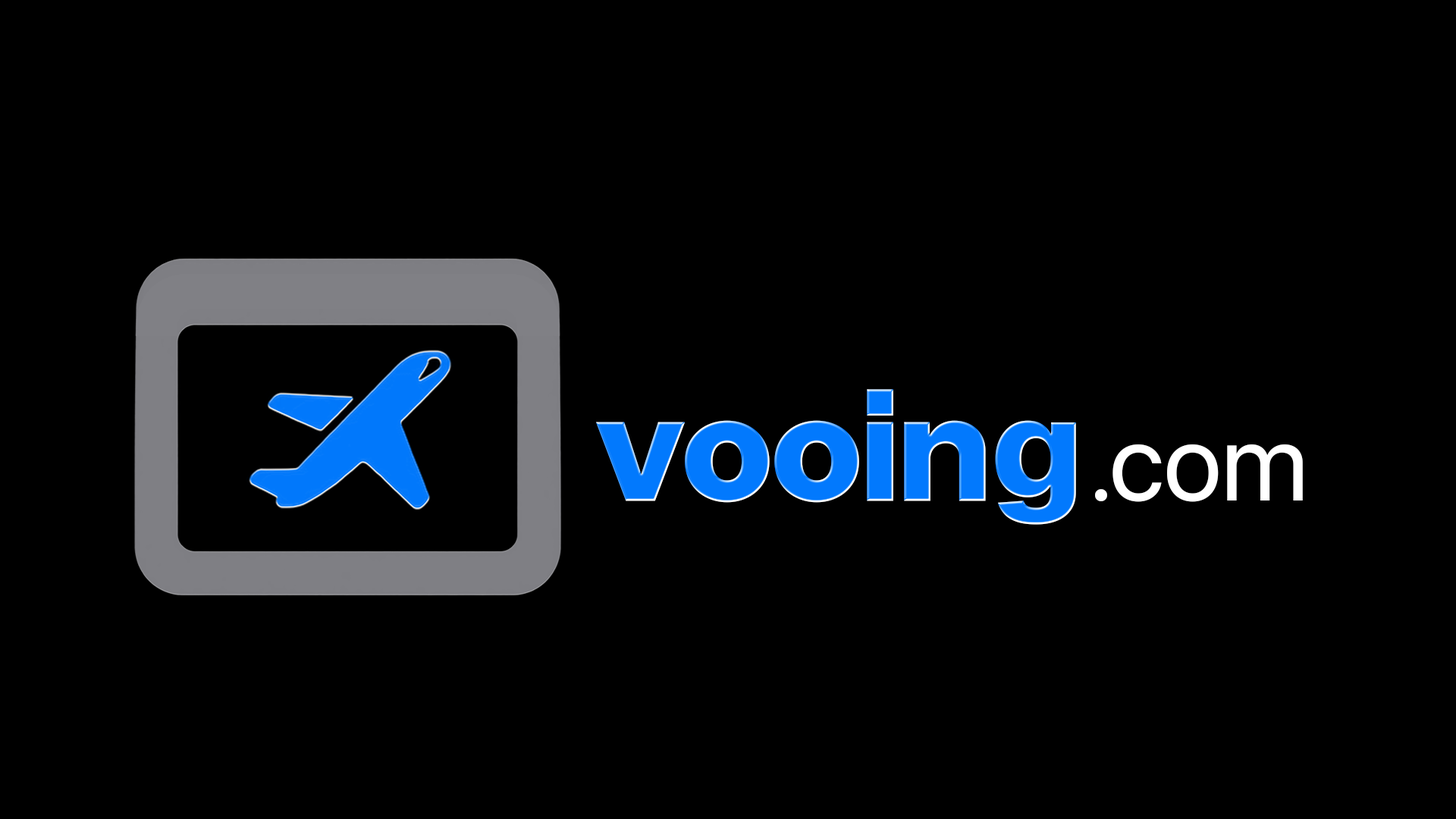
<style>
.page{position:relative;width:1456px;height:819px;background:#000000}
.page>*{position:absolute;margin:0}
.t1{font:145.7px "AnthropicSansDisplay-Extrabold";color:#0279fd}
.t2{font:145.7px "Geist-ExtraBold";color:#0279fd}
.t3{font:108.3px "SFProDisplay-Regular";color:#ffffff}
</style>
<div class="page">
<p class="t1" style="left:595px;top:389px;width:482px;height:137px">vooin<span class="t2">g</span></p>
<p class="t3" style="left:1094px;top:444px;width:210px;height:59px">.com</p>
</div>
